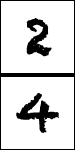
<style>
.page{position:relative;width:75px;height:150px;background:#ffffff}
.page>*{position:absolute;margin:0}
.t1{font:50px "Chalkduster";color:#000000;font-weight:bold}
.t2{font:12px/291.7px "Chalkduster";color:#000000;font-weight:bold}
</style>
<div class="page">
<p class="t1" style="left:26px;top:18px;width:26px;height:39px">2</p>
<p class="t2" style="left:16px;top:93px;width:43px;height:40px">4</p>
</div>
